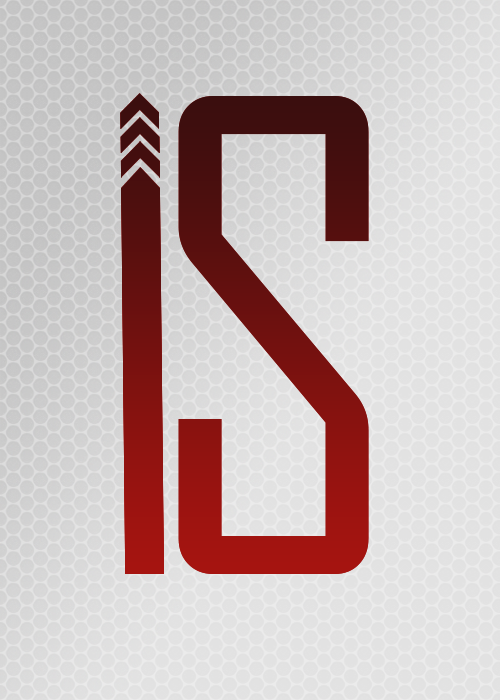
<style>
.page{position:relative;width:500px;height:700px}
.page>*{position:absolute;margin:0}
.t1{font:625px "AgencyFB-Reg"}
</style>
<div class="page">
<p class="t1" style="left:178px;top:96px;width:191px;height:478px">S</p>
</div>
